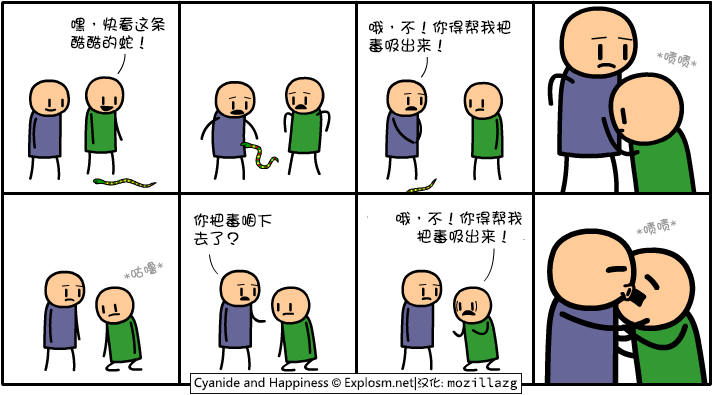
<style>
.page{position:relative;width:713px;height:395px;background:#ffffff}
.page>*{position:absolute;margin:0}
.t1{font:16px/18px "DFGirl";color:#000000}
.t2{font:14px "DFGirl";color:#999999}
</style>
<div class="page">
<p class="t1" style="left:71px;top:17px;width:94px;height:32px">嘿，快看这条<br>酷酷的蛇！</p>
<p class="t1" style="left:368px;top:19px;width:143px;height:34px">哦，不！你得帮我把<br>毒吸出来！</p>
<p class="t2" style="left:656px;top:51px;width:41px;height:17px;rotate:14deg">*啧啧*</p>
<p class="t1" style="left:193px;top:213px;width:79px;height:33px">你把毒咽下<br>去了？</p>
<p class="t1" style="left:396px;top:210px;width:126px;height:34px">哦，不！你得帮我<br>    把毒吸出来！</p>
<p class="t2" style="left:636px;top:218px;width:41px;height:17px;rotate:-14deg">*啧啧*</p>
<p class="t2" style="left:123px;top:261px;width:41px;height:18px;rotate:-18deg">*咕噜*</p>
</div>
